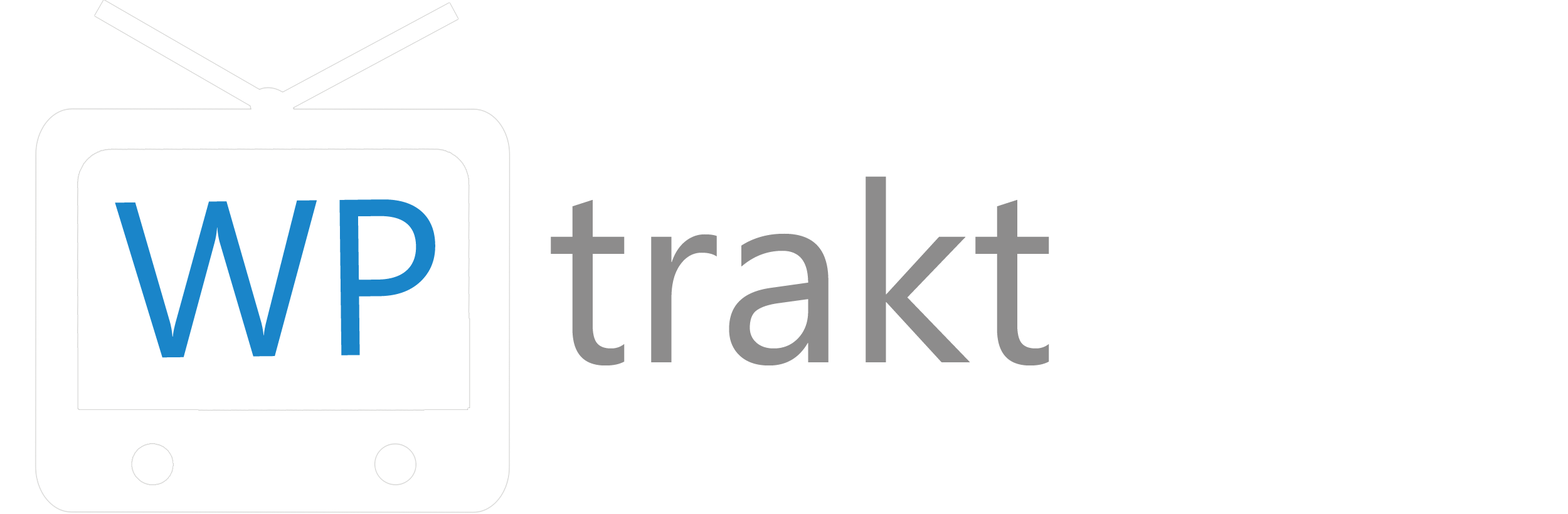
<style>
.page{position:relative;width:1568px;height:514px;background:#ffffff}
.page>*{position:absolute;margin:0}
.t1{font:250.9px "SegoeUI";color:#8d8c8c}
.t2{font:221.7px "SegoeUI";color:#1a85c9}
</style>
<div class="page">
<p class="t1" style="left:551px;top:176px;width:498px;height:190px">trakt</p>
<p class="t2" style="left:115px;top:199px;width:320px;height:159px;rotate:-1deg">WP</p>
</div>
